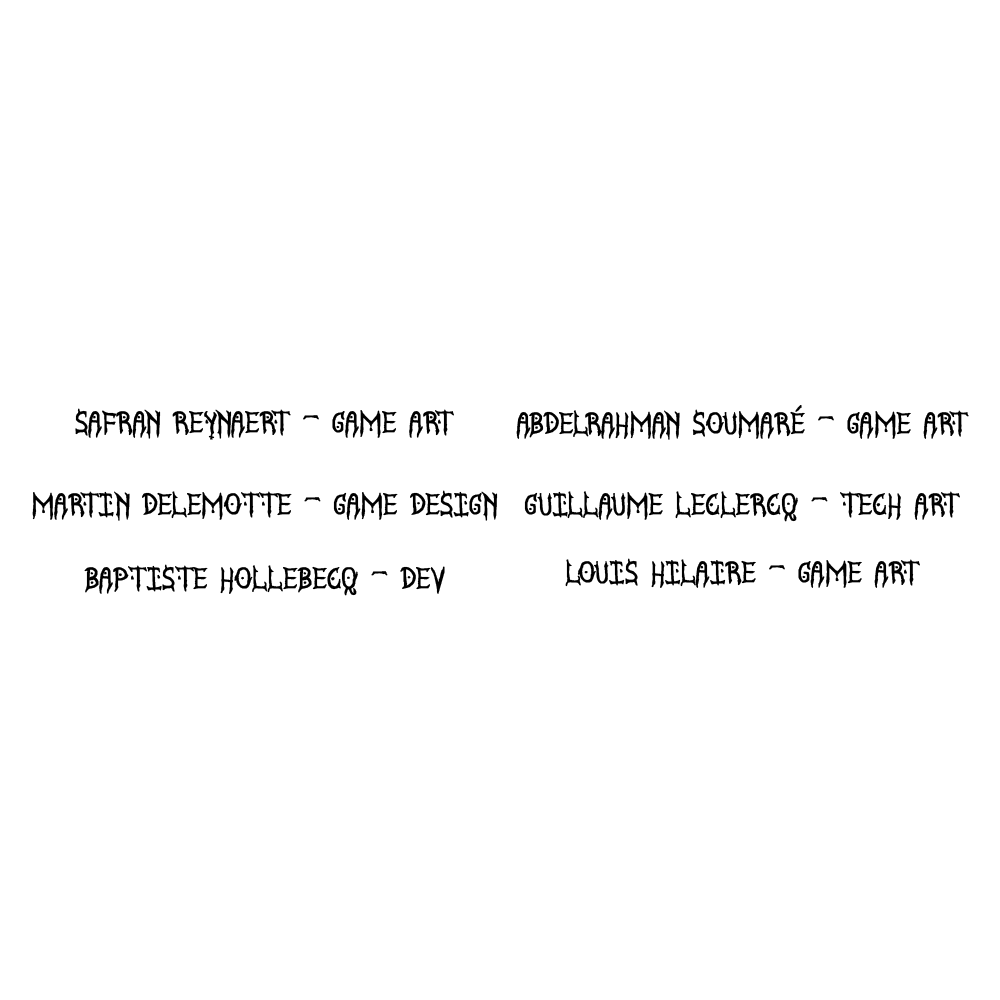
<style>
.page{position:relative;width:1000px;height:1000px;background:#ffffff}
.page>*{position:absolute;margin:0}
.t1{font:25px "SatanycDemoniacSt";color:#000000;font-weight:bold}
</style>
<div class="page">
<p class="t1" style="left:75px;top:408px;width:379px;height:32px">Safran Reynaert - Game Art</p>
<p class="t1" style="left:516px;top:405px;width:453px;height:35px">Abdelrahman Soumaré - Game Art</p>
<p class="t1" style="left:32px;top:490px;width:466px;height:31px">Martin Delemotte - Game Design</p>
<p class="t1" style="left:524px;top:491px;width:436px;height:31px">Guillaume Leclercq - Tech Art</p>
<p class="t1" style="left:565px;top:558px;width:355px;height:30px">Louis Hilaire - Game Art</p>
<p class="t1" style="left:84px;top:564px;width:361px;height:32px">Baptiste Hollebecq - Dev</p>
</div>
